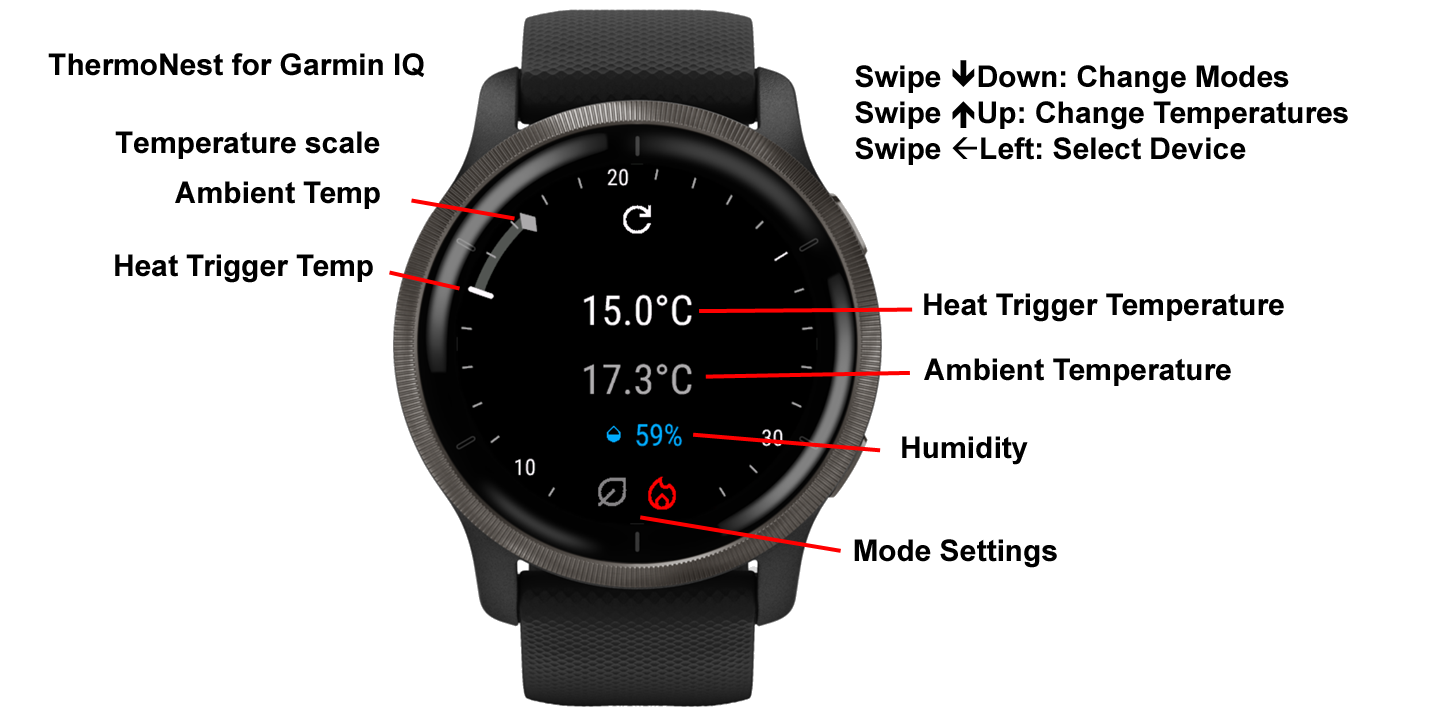
<style>
.page{position:relative;width:1440px;height:720px;background:#ffffff}
.page>*{position:absolute;margin:0}
.t1{font:30px "Arial-BoldMT";color:#000000}
.t2{font:30px "Wingdings-Regular";color:#000000}
</style>
<div class="page">
<p class="t1" style="left:48px;top:53px;width:377px;height:24px">ThermoNest for Garmin IQ</p>
<p class="t1" style="left:855px;top:60px;width:493px;height:105px">Swipe <span class="t2">ê</span>Down: Change Modes<br>Swipe <span class="t2">é</span>Up: Change Temperatures<br>Swipe <span class="t2">ß</span>Left: Select Device</p>
<p class="t1" style="left:115px;top:131px;width:265px;height:28px">Temperature scale</p>
<p class="t1" style="left:175px;top:181px;width:205px;height:28px">Ambient Temp</p>
<p class="t1" style="left:115px;top:254px;width:258px;height:29px">Heat Trigger Temp</p>
<p class="t1" style="left:924px;top:293px;width:360px;height:29px">Heat Trigger Temperature</p>
<p class="t1" style="left:924px;top:358px;width:307px;height:28px">Ambient Temperature</p>
<p class="t1" style="left:902px;top:436px;width:126px;height:29px">Humidity</p>
<p class="t1" style="left:854px;top:539px;width:203px;height:29px">Mode Settings</p>
</div>
